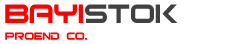
<style>
.page{position:relative;width:238px;height:44px;background:#ffffff}
.page>*{position:absolute;margin:0}
.t1{font:14px "Bitsumishi";color:#ff0000}
.t2{font:36px "Bitsumishi";color:#ff0000}
.t3{font:36px "Bitsumishi";color:#424141}
</style>
<div class="page">
<p class="t1" style="left:5px;top:4px;width:173px;height:36px"><span class="t2">Bayi</span><span class="t3">Stok<br></span>ProEnd Co.</p>
</div>
